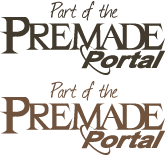
<style>
.page{position:relative;width:165px;height:155px;background:#ffffff}
.page>*{position:absolute;margin:0}
.t1{font:26.2px "Journal";letter-spacing:-0.01em;color:#ffffff}
.t2{font:26.2px "Journal";letter-spacing:-0.1em;color:#ffffff}
.t3{font:65.6px "VanHelsing-Regular";letter-spacing:-0.075em;color:#fefefe}
.t4{font:28.1px "13Misa";letter-spacing:-0.1em;color:#fafafa}
</style>
<div class="page">
<p class="t1" style="left:50px;top:1px;width:68px;height:20px"><span class="t2">P</span>art of the</p>
<p class="t3" style="left:0px;top:17px;width:165px;height:37px">Premade</p>
<p class="t4" style="left:80px;top:44px;width:86px;height:31px">Portal</p>
<p class="t1" style="left:50px;top:81px;width:68px;height:20px"><span class="t2">P</span>art of the</p>
<p class="t3" style="left:0px;top:97px;width:165px;height:37px">Premade</p>
<p class="t4" style="left:80px;top:124px;width:86px;height:31px">Portal</p>
</div>
